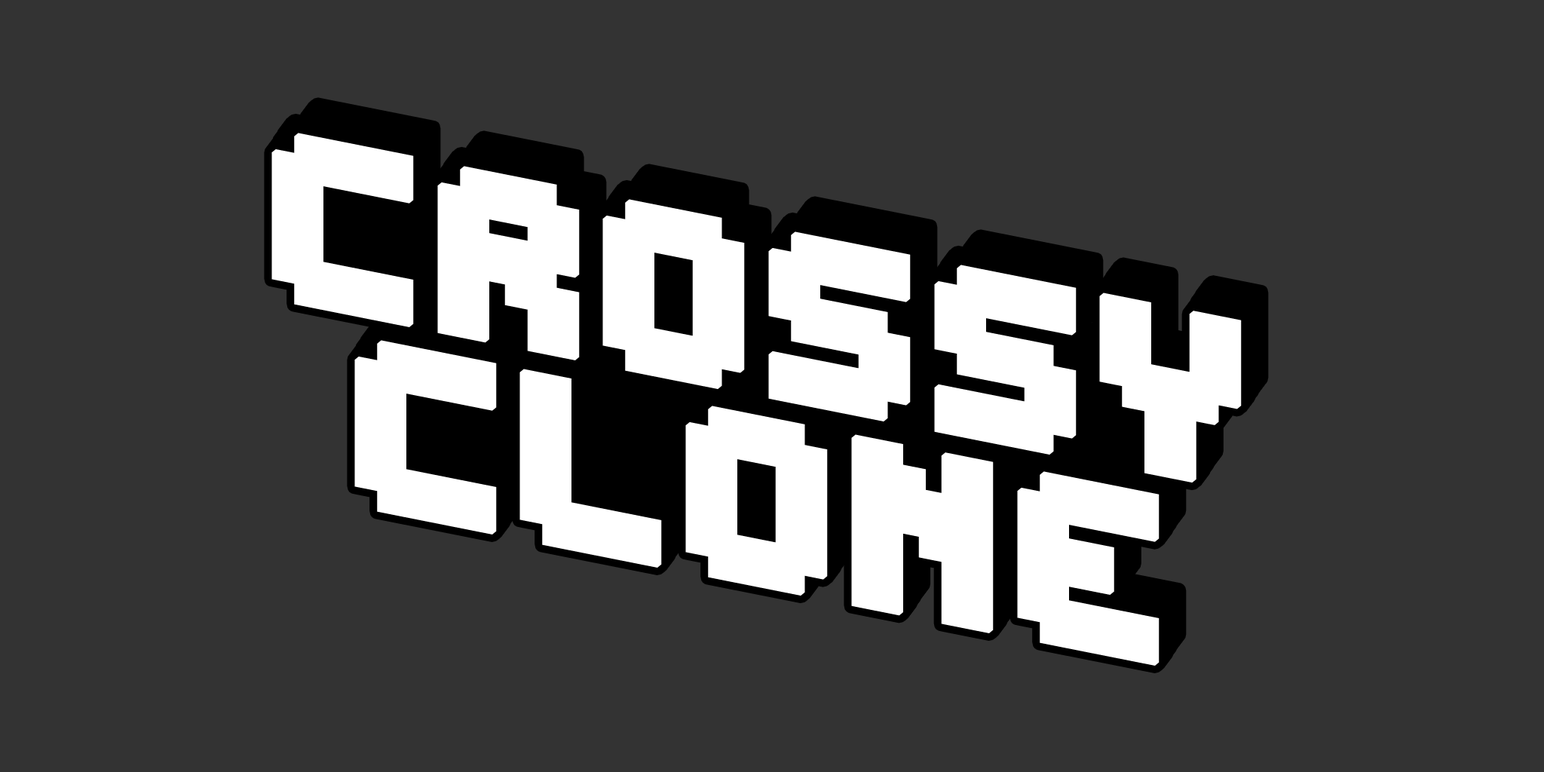
<style>
.page{position:relative;width:1544px;height:772px;background:#333333}
.page>*{position:absolute;margin:0}
.t1{font:286.7px "EditUndoBRK";color:#ffffff;font-weight:bold;scale:1.11 1}
</style>
<div class="page">
<p class="t1" style="left:271px;top:133px;width:971px;height:350px;rotate:11deg">Crossy</p>
<p class="t1" style="left:354px;top:340px;width:806px;height:326px;rotate:11deg">CLONE</p>
</div>
